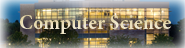
<style>
.page{position:relative;width:185px;height:48px}
.page>*{position:absolute;margin:0}
.t1{font:20px "MinionPro-Bold";color:#ebe0be}
</style>
<div class="page">
<p class="t1" style="left:20px;top:15px;width:151px;height:19px">Computer Science</p>
</div>
